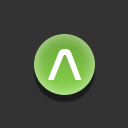
<style>
.page{position:relative;width:128px;height:128px;background:#333333}
.page>*{position:absolute;margin:0}
.t1{font:44.6px "NasalizationRg-Regular";color:#ffffff}
</style>
<div class="page">
<p class="t1" style="left:47px;top:49px;width:35px;height:31px">A</p>
</div>
